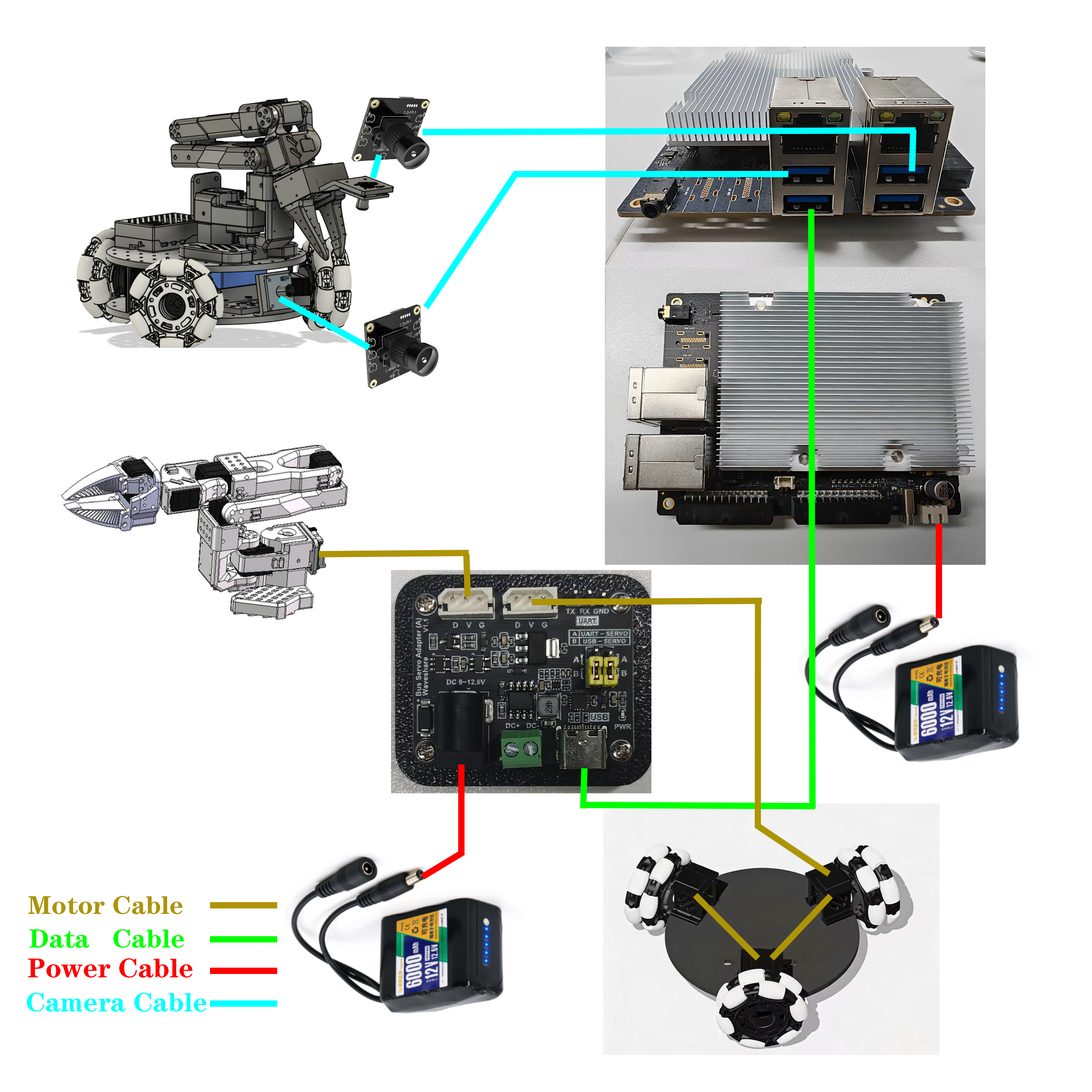
<style>
.page{position:relative;width:1092px;height:1092px;background:#ffffff}
.page>*{position:absolute;margin:0}
.t1{font:25.9px "FZCHSJW--GB1-0";color:#ad9407}
.t2{font:26.3px "FZCHSJW--GB1-0";color:#00ff00}
.t3{font:27.3px "FZCHSJW--GB1-0";color:#ff0000}
.t4{font:26.9px "FZCHSJW--GB1-0";color:#00ffff}
</style>
<div class="page">
<p class="t1" style="left:28px;top:896px;width:155px;height:18px">Motor Cable</p>
<p class="t2" style="left:29px;top:929px;width:155px;height:19px">Data   Cable</p>
<p class="t3" style="left:28px;top:958px;width:165px;height:20px">Power Cable</p>
<p class="t4" style="left:26px;top:992px;width:181px;height:20px">Camera Cable</p>
</div>
